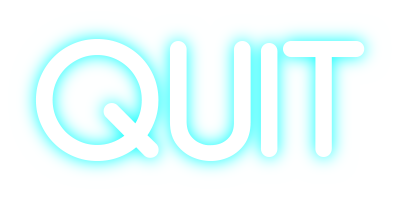
<style>
.page{position:relative;width:400px;height:200px;background:#ffffff}
.page>*{position:absolute;margin:0}
.t1{font:200px "bioliquid-Regular";color:#ffffff}
</style>
<div class="page">
<p class="t1" style="left:35px;top:39px;width:330px;height:122px">Quit</p>
</div>
